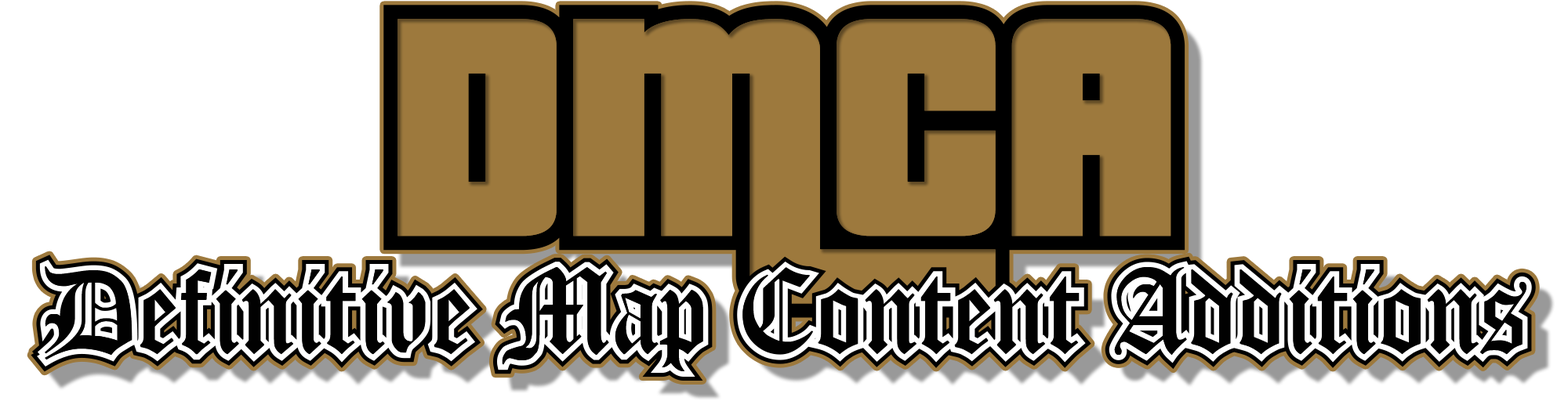
<style>
.page{position:relative;width:1568px;height:401px;background:#ffffff}
.page>*{position:absolute;margin:0}
.t1{font:339.7px "Pricedown-Black";color:#9d793d}
.t2{font:117.6px "Diploma";letter-spacing:0.02em;color:#010101;scale:0.95 1}
.t3{font:130.7px "Beckett";letter-spacing:0.02em;color:#010101;scale:0.95 1}
</style>
<div class="page">
<p class="t1" style="left:397px;top:19px;width:774px;height:285px">DMCA</p>
<p class="t2" style="left:45px;top:267px;width:1481px;height:105px">Definiti<span class="t3">v</span>e Map Content Additions</p>
</div>
